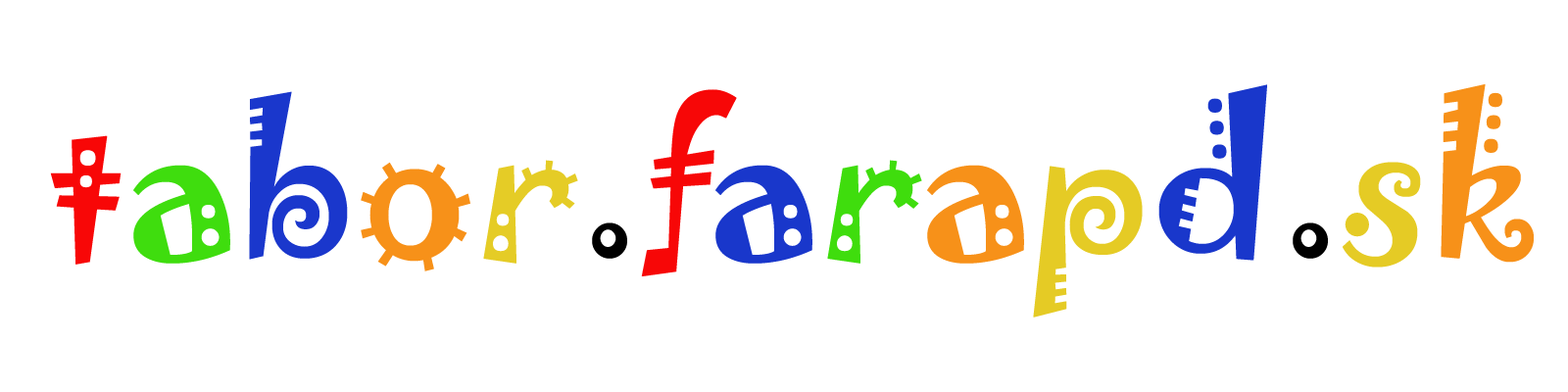
<style>
.page{position:relative;width:1568px;height:392px;background:#ffffff}
.page>*{position:absolute;margin:0}
.t1{font:196px "Jokerman-Regular";color:#f80707}
.t2{font:196px "Jokerman-Regular";color:#3fdd0e}
.t3{font:196px "Jokerman-Regular";color:#1a37cc}
.t4{font:196px "Jokerman-Regular";color:#f79119}
.t5{font:196px "Jokerman-Regular";color:#e5cc26}
.t6{font:196px "Jokerman-Regular";color:#000000}
.t7{font:196px "Jokerman-Regular";color:#f70707}
.t8{font:196px "Jokerman-Regular";color:#1937cb}
.t9{font:196px "Jokerman-Regular";color:#3fdd0d}
.t10{font:196px "Jokerman-Regular";color:#e5cb25}
</style>
<div class="page">
<p class="t1" style="left:50px;top:83px;width:1484px;height:235px">t<span class="t2">a</span><span class="t3">b</span><span class="t4">o</span><span class="t5">r</span><span class="t6">.</span><span class="t7">f</span><span class="t8">a</span><span class="t9">r</span><span class="t4">a</span><span class="t10">p</span><span class="t8">d</span><span class="t6">.</span><span class="t10">s</span><span class="t4">k</span></p>
</div>
